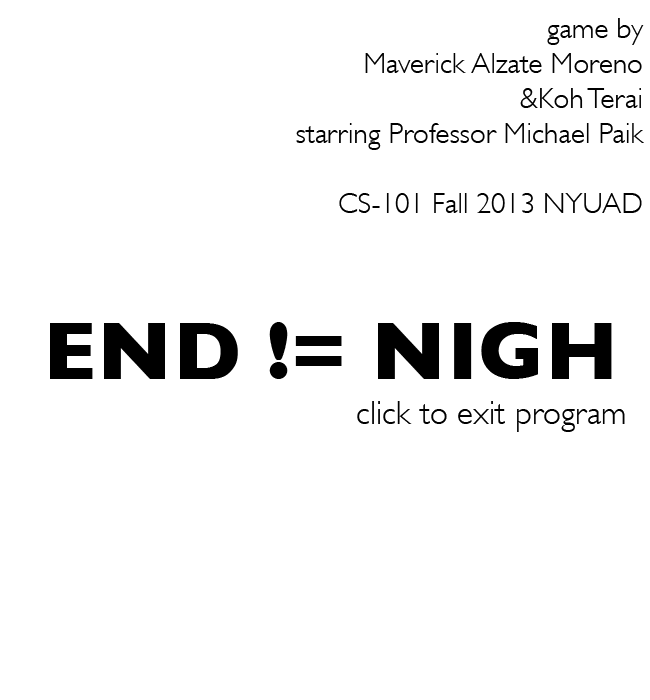
<style>
.page{position:relative;width:650px;height:700px;background:#ffffff}
.page>*{position:absolute;margin:0}
.t1{font:29.2px "GillSans-Light";color:#000000}
.t2{font:83.3px "GillSans-Bold";color:#000000}
.t3{font:33.3px "GillSans-Light";color:#000000}
</style>
<div class="page">
<p class="t1" style="left:296px;top:18px;width:348px;height:195px;text-align:right">game by<br>Maverick Alzate Moreno<br>&amp;Koh Terai<br>starring Professor Michael Paik<br><br>CS-101 Fall 2013 NYUAD</p>
<p class="t2" style="left:50px;top:322px;width:562px;height:57px">END != NIGH</p>
<p class="t3" style="left:357px;top:401px;width:268px;height:31px">click to exit program</p>
</div>
